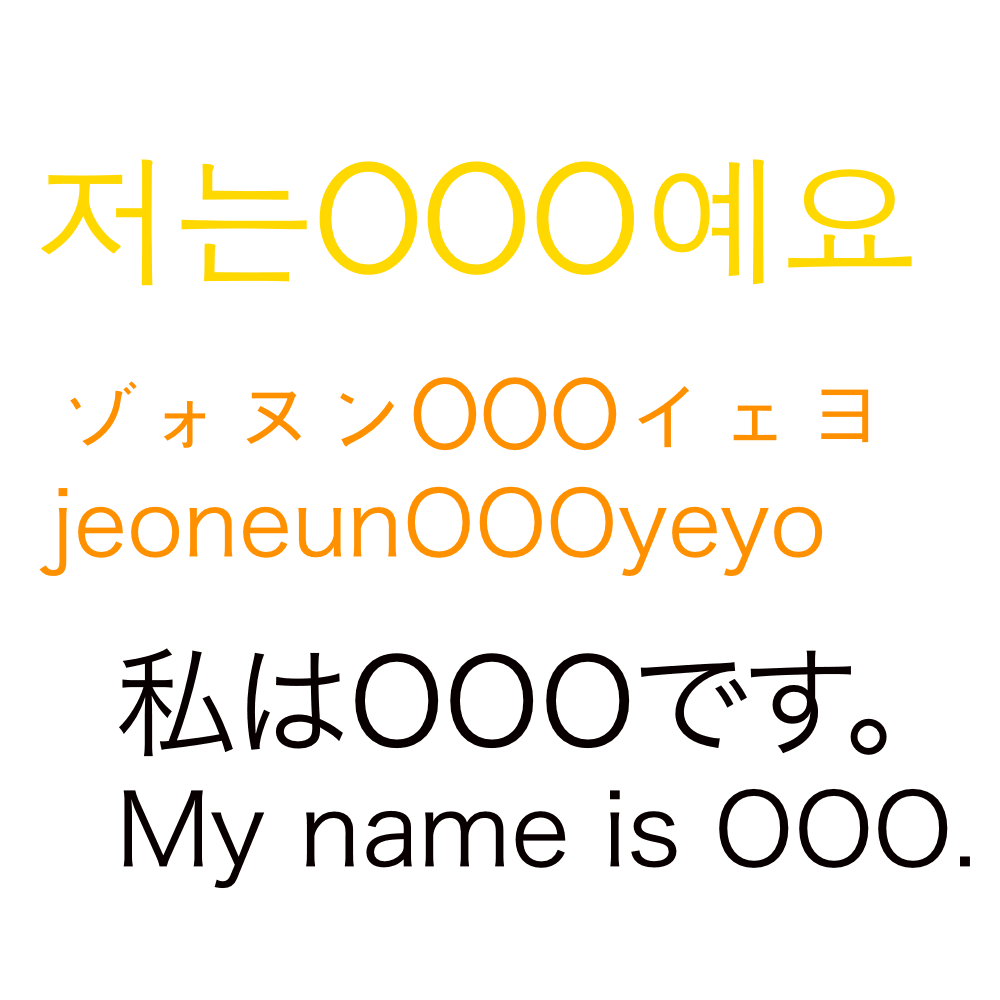
<style>
.page{position:relative;width:1000px;height:1000px;background:#ffffff}
.page>*{position:absolute;margin:0}
.t1{font:140px "AppleGothic";color:#ffd800}
.t2{font:90px "HiraKakuProN-W3";color:#ff9000}
.t3{font:90px "AppleGothic";color:#ff9000}
.t4{font:100px "HiraKakuProN-W3";color:#080000}
.t5{font:120px "HiraKakuProN-W3";color:#080000}
</style>
<div class="page">
<p class="t1" style="left:41px;top:159px;width:871px;height:127px">저는OOO예요</p>
<p class="t2" style="left:39px;top:377px;width:830px;height:199px"><span class="t3">ゾォヌンOOOイェヨ<br></span>jeoneunOOOyeyo</p>
<p class="t4" style="left:119px;top:648px;width:851px;height:241px"><span class="t5">私はOOOです。<br></span>My name is OOO.</p>
</div>
